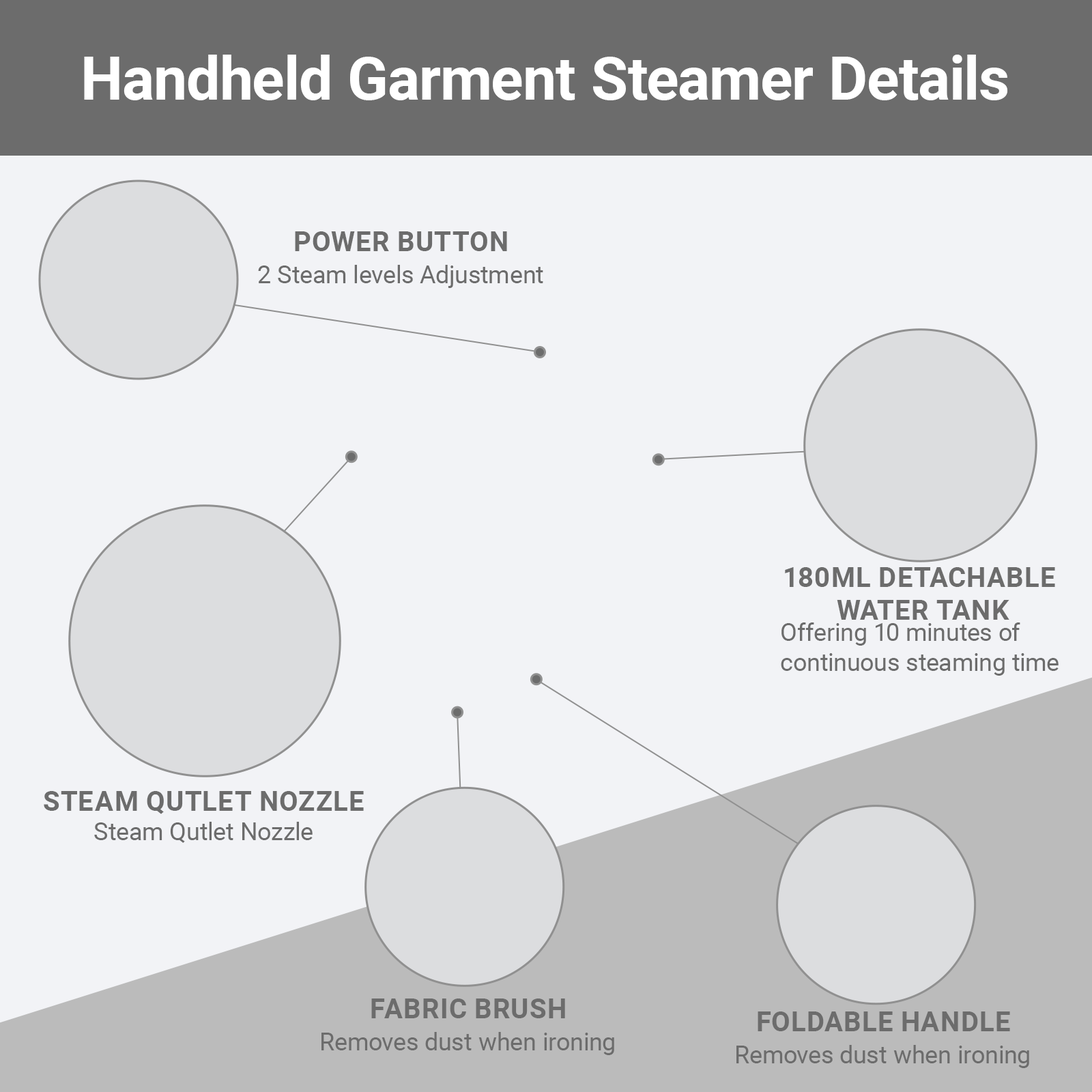
<style>
.page{position:relative;width:1092px;height:1092px;background:#f2f3f6}
.page>*{position:absolute;margin:0}
.t1{font:60.1px "Roboto-Bold";color:#ffffff}
.t2{font:27.3px "Roboto-Bold";color:#6c6c6c;text-transform:uppercase}
.t3{font:24.6px "Roboto-Regular";color:#6c6c6c}
</style>
<div class="page">
<p class="t1" style="left:84px;top:55px;width:923px;height:45px">Handheld Garment Steamer Details</p>
<p class="t2" style="left:295px;top:231px;width:212px;height:20px">Power Button</p>
<p class="t3" style="left:258px;top:265px;width:285px;height:23px">2 Steam levels Adjustment</p>
<p class="t2" style="left:785px;top:567px;width:270px;height:53px;text-align:center">180ml Detachable<br> Water Tank</p>
<p class="t3" style="left:781px;top:622px;width:278px;height:54px">Offering 10 minutes of<br>continuous steaming time</p>
<p class="t2" style="left:44px;top:791px;width:320px;height:23px">Steam Qutlet Nozzle</p>
<p class="t3" style="left:94px;top:822px;width:219px;height:21px">Steam Qutlet Nozzle</p>
<p class="t2" style="left:371px;top:998px;width:194px;height:20px">Fabric Brush</p>
<p class="t2" style="left:758px;top:1011px;width:252px;height:20px">Foldable Handle</p>
<p class="t3" style="left:321px;top:1032px;width:293px;height:23px">Removes dust when ironing</p>
<p class="t3" style="left:736px;top:1045px;width:293px;height:23px">Removes dust when ironing</p>
</div>
